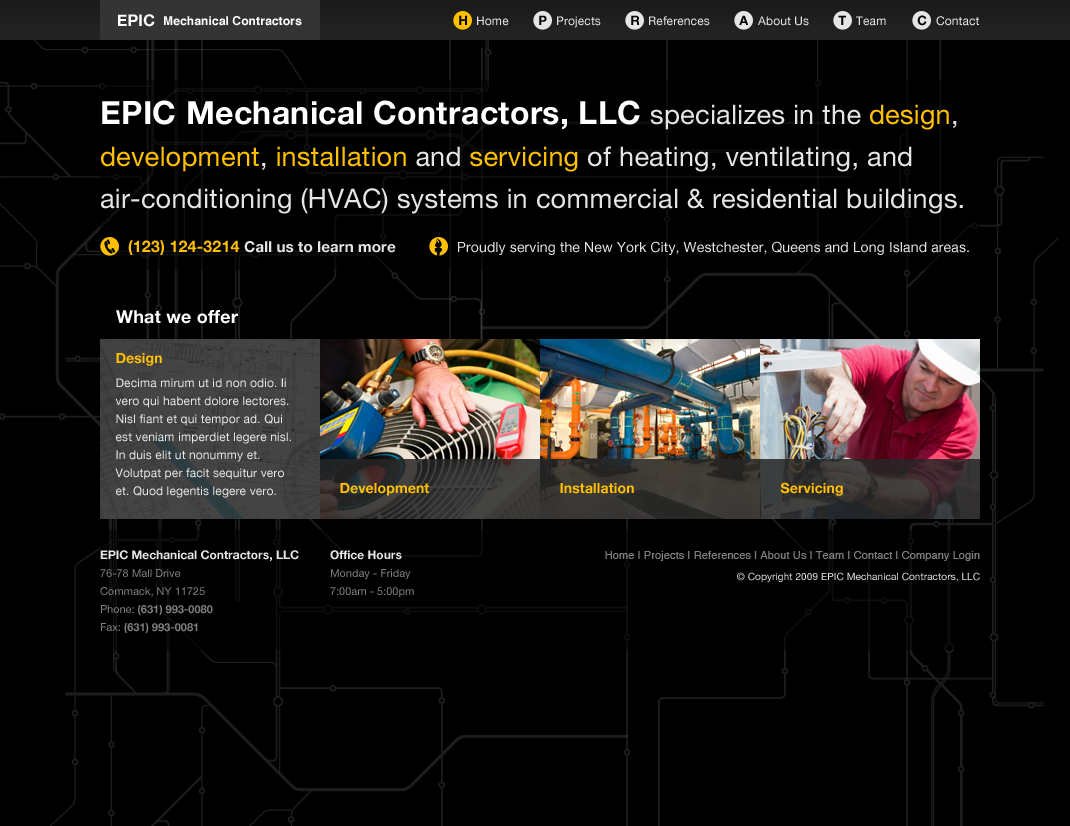
<style>
.page{position:relative;width:1070px;height:826px;background:#000000}
.page>*{position:absolute;margin:0}
.t1{font:16px "HelveticaNeue-Bold";letter-spacing:0.01em;color:#ffffff}
.t2{font:12px "Helvetica-Bold";letter-spacing:0.01em;color:#ffffff}
.t3{font:13px "HelveticaNeue-Bold";letter-spacing:2.5em;color:#000000}
.t4{font:12px "HelveticaNeue";letter-spacing:0.01em;color:#e5e5e5}
.t5{font:27px/42px "HelveticaNeue";letter-spacing:0.01em;color:#e5e5e5}
.t6{font:32px/42px "HelveticaNeue-Bold";letter-spacing:0.01em;color:#ffffff}
.t7{font:27px/42px "HelveticaNeue";letter-spacing:0.01em;color:#ffc000}
.t8{font:15px "HelveticaNeue-Bold";letter-spacing:0.01em;color:#e5e5e5}
.t9{font:16px "HelveticaNeue-Bold";letter-spacing:0.01em;color:#ffc000}
.t10{font:14px "HelveticaNeue";letter-spacing:0.01em;color:#e5e5e5}
.t11{font:18px "HelveticaNeue-Bold";letter-spacing:0.01em;color:#ffffff}
.t12{font:12px/18px "HelveticaNeue";letter-spacing:0.01em;color:#e5e5e5}
.t13{font:14px "HelveticaNeue-Bold";letter-spacing:0.01em;color:#ffc000}
.t14{font:12px/24px "HelveticaNeue";letter-spacing:0.01em;color:#e5e5e5}
.t15{font:11px/18px "HelveticaNeue";color:#808080}
.t16{font:12px/18px "HelveticaNeue-Bold";color:#e5e5e5}
.t17{font:11px/18px "HelveticaNeue-Bold";color:#808080}
.t18{font:11px "Helvetica";letter-spacing:0.01em;color:#808080}
.t19{font:10px "HelveticaNeue";letter-spacing:0.01em;color:#e5e5e5}
</style>
<div class="page">
<p class="t1" style="left:118px;top:14px;width:37px;height:13px">EPIC</p>
<p class="t2" style="left:164px;top:16px;width:138px;height:10px">Mechanical Contractors</p>
<p class="t3" style="left:459px;top:15px;width:8px;height:10px">H</p>
<p class="t4" style="left:477px;top:16px;width:32px;height:10px">Home</p>
<p class="t3" style="left:539px;top:15px;width:8px;height:10px">P</p>
<p class="t4" style="left:557px;top:16px;width:44px;height:12px">Projects</p>
<p class="t3" style="left:631px;top:15px;width:9px;height:10px">R</p>
<p class="t4" style="left:649px;top:16px;width:61px;height:10px">References</p>
<p class="t3" style="left:739px;top:15px;width:10px;height:10px">A</p>
<p class="t4" style="left:758px;top:16px;width:51px;height:10px">About Us</p>
<p class="t3" style="left:838px;top:15px;width:8px;height:10px">T</p>
<p class="t4" style="left:856px;top:16px;width:30px;height:10px">Team</p>
<p class="t3" style="left:917px;top:15px;width:10px;height:11px">C</p>
<p class="t4" style="left:936px;top:16px;width:43px;height:10px">Contact</p>
<p class="t5" style="left:101px;top:100px;width:862px;height:114px"><span class="t6">EPIC Mechanical Contractors, LLC </span>specializes in the <span class="t7">design</span>, <span class="t7">development</span>, <span class="t7">installation</span> and <span class="t7">servicing</span> of heating, ventilating, and air-conditioning (HVAC) systems in commercial &amp; residential buildings.</p>
<p class="t8" style="left:128px;top:240px;width:268px;height:15px"><span class="t9">(123) 124-3214 </span>Call us to learn more</p>
<p class="t10" style="left:458px;top:241px;width:511px;height:14px">Proudly serving the New York City, Westchester, Queens and Long Island areas.</p>
<p class="t11" style="left:116px;top:310px;width:122px;height:14px">What we offer</p>
<p class="t12" style="left:115px;top:353px;width:176px;height:145px"><span class="t13">Design<br></span><span class="t14">Decima mirum ut id non odio. Ii </span>vero qui habent dolore lectores. Nisl fiant et qui tempor ad. Qui est veniam imperdiet legere nisl. In duis elit ut nonummy et. Volutpat per facit sequitur vero et. Quod legentis legere vero.</p>
<p class="t13" style="left:340px;top:483px;width:89px;height:13px">Development</p>
<p class="t13" style="left:560px;top:483px;width:74px;height:11px">Installation</p>
<p class="t13" style="left:780px;top:482px;width:63px;height:14px">Servicing</p>
<p class="t15" style="left:100px;top:550px;width:199px;height:83px"><span class="t16">EPIC Mechanical Contractors, LLC<br></span>76-78 Mall Drive<br>Commack, NY 11725<br>Phone:<span class="t17"> (631) 993-0080<br></span>Fax: <span class="t17">(631) 993-0081</span></p>
<p class="t15" style="left:330px;top:550px;width:84px;height:48px"><span class="t16">Office Hours<br></span>Monday - Friday<br>7:00am - 5:00pm</p>
<p class="t18" style="left:605px;top:551px;width:375px;height:10px">Home | Projects | References | About Us | Team | Contact | Company Login</p>
<p class="t19" style="left:737px;top:572px;width:243px;height:10px">© Copyright 2009 EPIC Mechanical Contractors, LLC</p>
</div>
